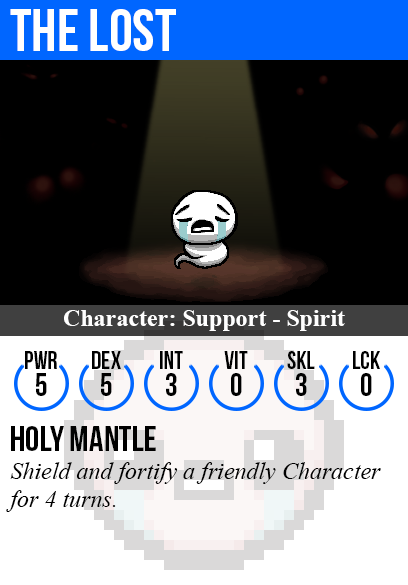
<style>
.page{position:relative;width:408px;height:585px;background:#000000}
.page>*{position:absolute;margin:0}
.t1{font:60px "BebasNeue";color:#ffffff}
.t2{font:24px "TimesNewRomanPS-BoldMT";color:#ffffff}
.t3{font:25px "BebasNeue";color:#000000}
.t4{font:32px "BebasNeue";color:#000000}
.t5{font:36px "BebasNeue";color:#000000}
.t6{font:24px "TimesNewRomanPS-ItalicMT";color:#000000}
</style>
<div class="page">
<p class="t1" style="left:10px;top:9px;width:166px;height:42px">the lost</p>
<p class="t2" style="left:64px;top:310px;width:281px;height:21px">Character: Support - Spirit</p>
<p class="t3" style="left:25px;top:351px;width:32px;height:18px">PWR</p>
<p class="t3" style="left:92px;top:351px;width:29px;height:18px">dex</p>
<p class="t3" style="left:160px;top:351px;width:23px;height:18px">int</p>
<p class="t3" style="left:224px;top:351px;width:24px;height:18px">vit</p>
<p class="t3" style="left:287px;top:351px;width:28px;height:18px">skl</p>
<p class="t3" style="left:353px;top:351px;width:27px;height:18px">lck</p>
<p class="t4" style="left:36px;top:373px;width:11px;height:23px">5</p>
<p class="t4" style="left:101px;top:373px;width:11px;height:23px">5</p>
<p class="t4" style="left:166px;top:373px;width:11px;height:23px">3</p>
<p class="t4" style="left:231px;top:373px;width:11px;height:23px">0</p>
<p class="t4" style="left:296px;top:373px;width:11px;height:23px">3</p>
<p class="t4" style="left:361px;top:373px;width:11px;height:23px">0</p>
<p class="t5" style="left:11px;top:426px;width:145px;height:25px">holy mantle</p>
<p class="t6" style="left:6px;top:462px;width:375px;height:50px">Shield and fortify a friendly Character<br>for 4 turns.</p>
</div>
